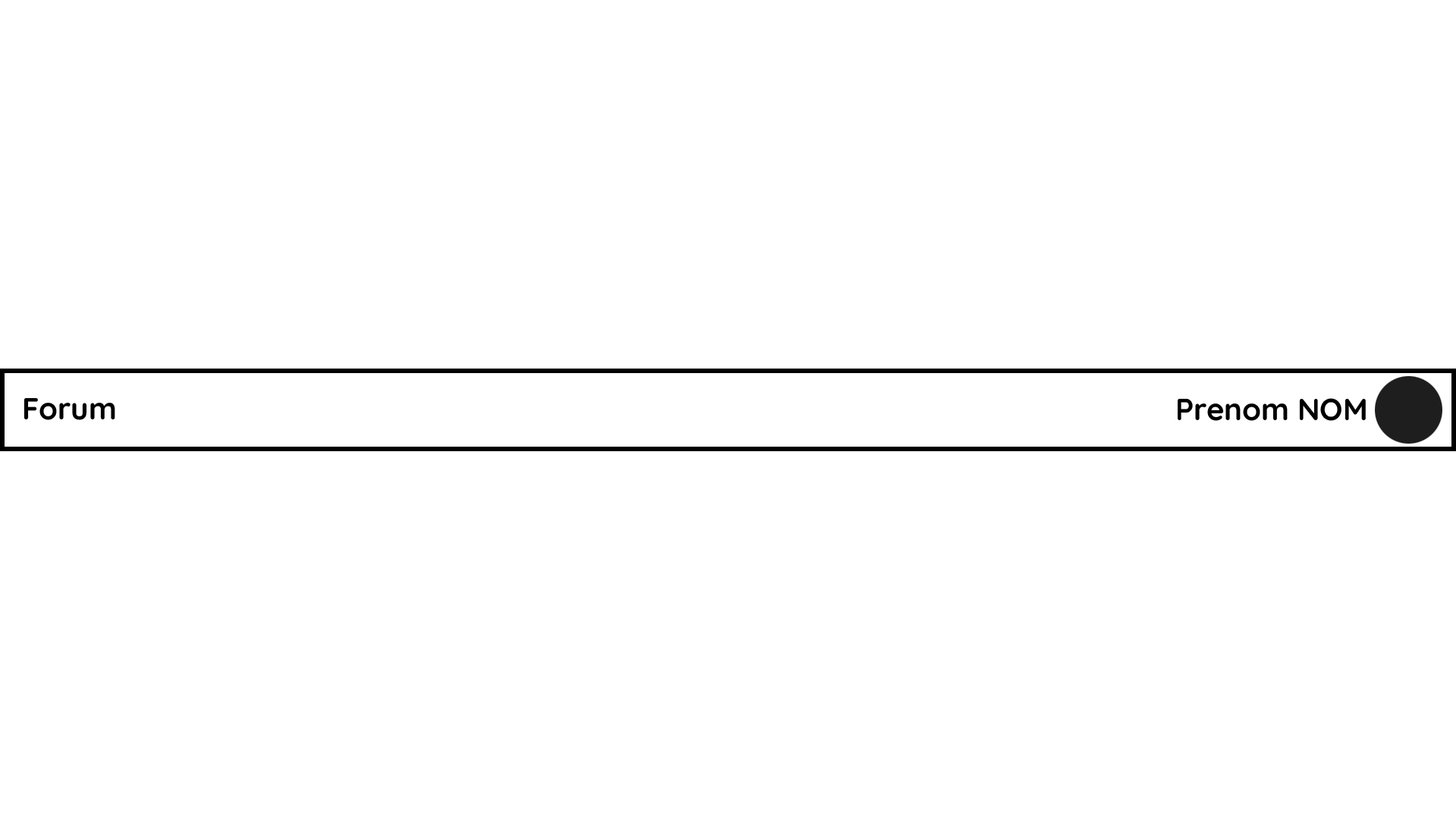
<style>
.page{position:relative;width:1456px;height:819px;background:#ffffff}
.page>*{position:absolute;margin:0}
.t1{font:30.3px "Quicksand-Bold";color:#000000}
</style>
<div class="page">
<p class="t1" style="left:24px;top:397px;width:91px;height:23px">Forum</p>
<p class="t1" style="left:1177px;top:398px;width:189px;height:23px">Prenom NOM</p>
</div>
